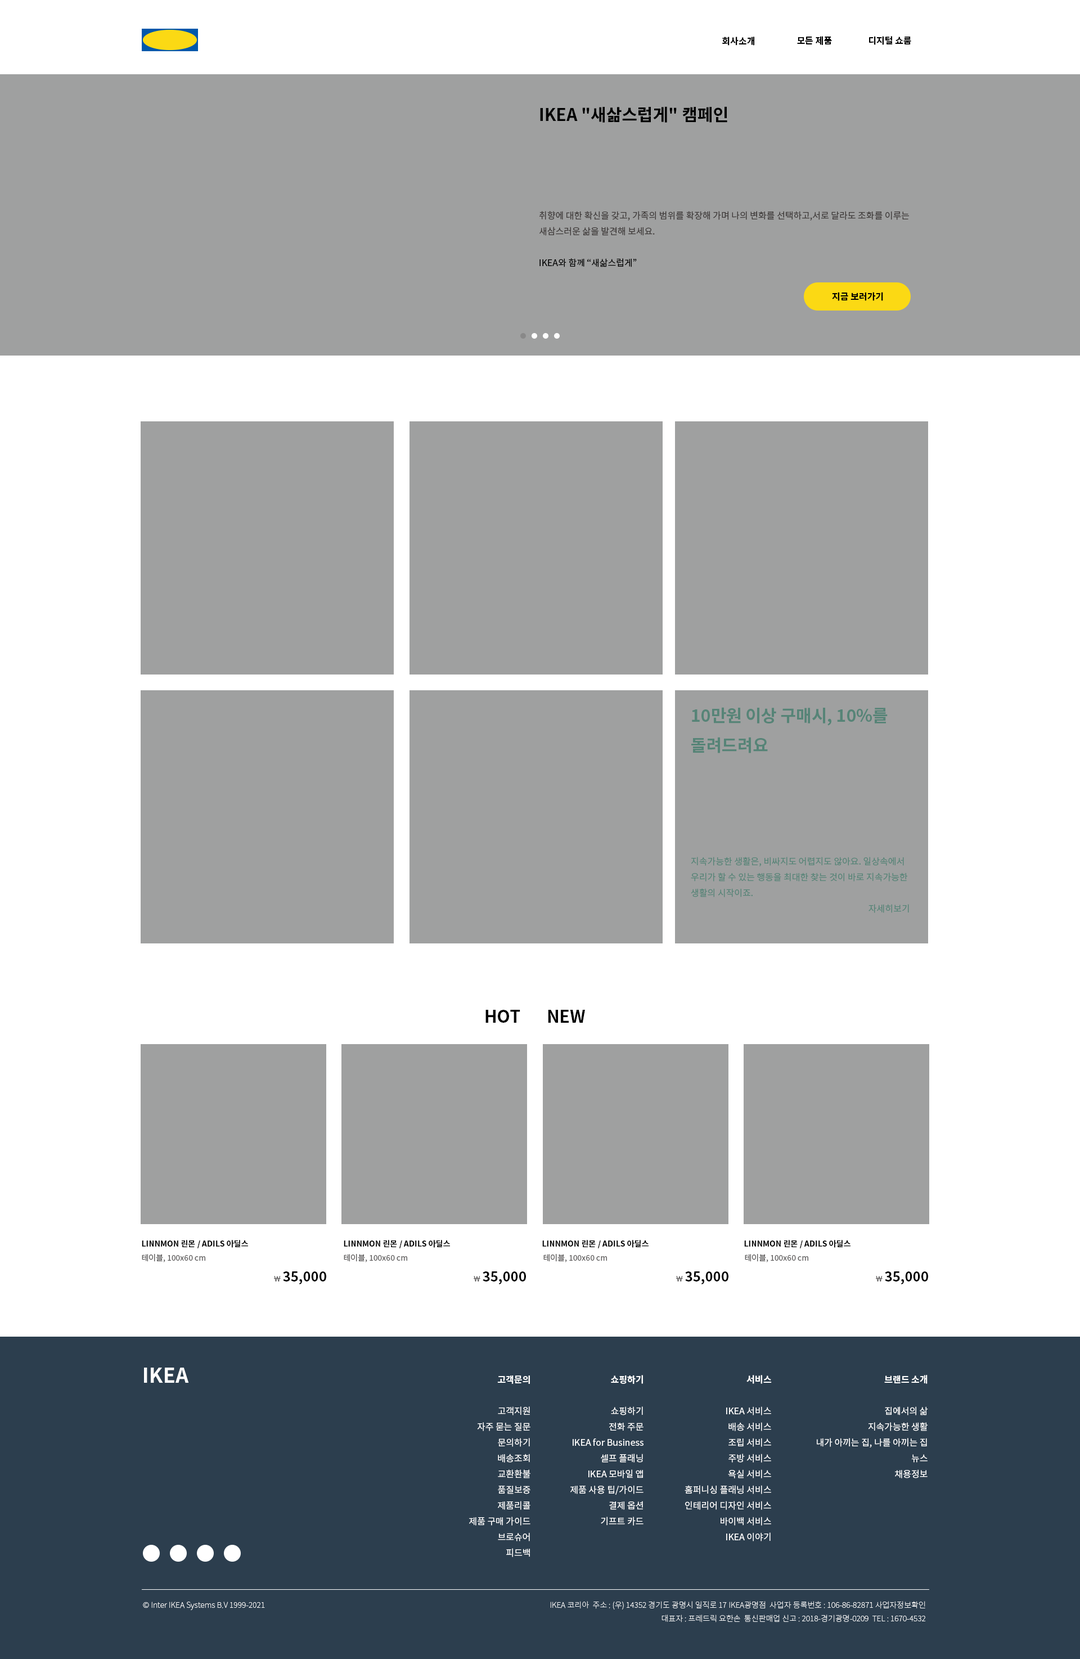
<style>
.page{position:relative;width:1080px;height:1659px;background:#9fa0a0}
.page>*{position:absolute;margin:0}
.t1{font:9px "NotoSansKR-Bold";color:#000000}
.t2{font:9px "NotoSansKR-Regular";color:#3e3a39}
.t3{font:16.9px "NotoSansKR-Bold";color:#000000}
.t4{font:9px "NotoSansKR-Regular";color:#000000}
.t5{font:9px "NotoSansKR-Regular";color:#568477}
.t6{font:16.9px "NotoSansKR-Bold";color:#568477}
.t7{font:7.9px "NotoSansKR-Bold";color:#000000}
.t8{font:7.9px "NotoSansKR-Regular";color:#595757}
.t9{font:13.5px "NotoSansKR-Bold";color:#000000}
.t10{font:20.2px "NotoSansKR-Bold";color:#ffffff}
.t11{font:9px "NotoSansKR-Regular";color:#ffffff}
.t12{font:9px "NotoSansKR-Bold";color:#ffffff}
.t13{font:7.9px "NotoSansKR-Thin";color:#ffffff}
</style>
<div class="page">
<p class="t1" style="left:722px;top:37px;width:32px;height:9px">회사소개</p>
<p class="t1" style="left:797px;top:36px;width:35px;height:9px">모든 제품</p>
<p class="t1" style="left:869px;top:36px;width:42px;height:9px">디지털 쇼룸</p>
<p class="t2" style="left:539px;top:106px;width:370px;height:161px"><span class="t3">IKEA "새삶스럽게" 캠페인<br><br><br><br></span>취향에 대한 확신을 갖고, 가족의 범위를 확장해 가며 나의 변화를 선택하고,서로 달라도 조화를 이루는 새삼스러운 삶을 발견해 보세요.<br><span class="t4"><br>IKEA와 함께 “새삶스럽게”</span></p>
<p class="t1" style="left:832px;top:292px;width:51px;height:9px">지금 보러가기</p>
<p class="t5" style="left:691px;top:707px;width:218px;height:206px"><span class="t6">10만원 이상 구매시, 10%를 돌려드려요<br><br><br></span><br><br>지속가능한 생활은, 비싸지도 어렵지도 않아요. 일상속에서 우리가 할 수 있는 행동을 최대한 찾는 것이 바로 지속가능한 생활의 시작이죠.<br>자세히보기</p>
<p class="t3" style="left:485px;top:1010px;width:35px;height:13px">HOT</p>
<p class="t3" style="left:548px;top:1010px;width:37px;height:13px">NEW</p>
<p class="t7" style="left:142px;top:1240px;width:106px;height:8px">LINNMON 린몬 / ADILS 아딜스</p>
<p class="t7" style="left:344px;top:1240px;width:106px;height:8px">LINNMON 린몬 / ADILS 아딜스</p>
<p class="t7" style="left:542px;top:1240px;width:107px;height:8px">LINNMON 린몬 / ADILS 아딜스</p>
<p class="t7" style="left:744px;top:1240px;width:106px;height:8px">LINNMON 린몬 / ADILS 아딜스</p>
<p class="t8" style="left:142px;top:1254px;width:63px;height:8px">테이블, 100x60 cm</p>
<p class="t8" style="left:344px;top:1254px;width:63px;height:8px">테이블, 100x60 cm</p>
<p class="t8" style="left:543px;top:1254px;width:64px;height:8px">테이블, 100x60 cm</p>
<p class="t8" style="left:745px;top:1254px;width:63px;height:8px">테이블, 100x60 cm</p>
<p class="t8" style="left:274px;top:1276px;width:7px;height:5px">￦</p>
<p class="t9" style="left:283px;top:1271px;width:43px;height:14px">35,000</p>
<p class="t8" style="left:474px;top:1276px;width:6px;height:5px">￦</p>
<p class="t9" style="left:483px;top:1271px;width:43px;height:14px">35,000</p>
<p class="t8" style="left:676px;top:1276px;width:7px;height:5px">￦</p>
<p class="t9" style="left:685px;top:1271px;width:43px;height:14px">35,000</p>
<p class="t8" style="left:876px;top:1276px;width:7px;height:5px">￦</p>
<p class="t9" style="left:885px;top:1271px;width:43px;height:14px">35,000</p>
<p class="t10" style="left:144px;top:1367px;width:45px;height:16px">IKEA</p>
<p class="t11" style="left:469px;top:1375px;width:61px;height:182px;text-align:right"><span class="t12">고객문의<br></span><br>고객지원<br>자주 묻는 질문<br>문의하기<br>배송조회<br>교환환불<br>품질보증<br>제품리콜<br>제품 구매 가이드<br>브로슈어<br>피드백</p>
<p class="t11" style="left:570px;top:1375px;width:74px;height:151px;text-align:right"><span class="t12">쇼핑하기<br></span><br>쇼핑하기<br>전화 주문<br>IKEA for Business<br>셀프 플래닝<br>IKEA 모바일 앱<br>제품 사용 팁/가이드<br>결제 옵션<br>기프트 카드</p>
<p class="t11" style="left:685px;top:1375px;width:87px;height:166px;text-align:right"><span class="t12">서비스<br></span><br>IKEA 서비스<br>배송 서비스<br>조립 서비스<br>주방 서비스<br>욕실 서비스<br>홈퍼니싱 플래닝 서비스<br>인테리어 디자인 서비스<br>바이백 서비스<br>IKEA 이야기</p>
<p class="t11" style="left:817px;top:1375px;width:111px;height:103px;text-align:right"><span class="t12">브랜드 소개<br></span><br>집에서의 삶<br>지속가능한 생활<br>내가 아끼는 집, 나를 아끼는 집<br>뉴스<br>채용정보</p>
<p class="t13" style="left:143px;top:1601px;width:122px;height:9px">© Inter IKEA Systems B.V 1999-2021</p>
<p class="t13" style="left:550px;top:1601px;width:376px;height:21px;text-align:right">IKEA 코리아  주소 : (우) 14352 경기도 광명시 일직로 17 IKEA광명점  사업자 등록번호 : 106-86-82871 사업자정보확인<br>대표자 : 프레드릭 요한손  통신판매업 신고 : 2018-경기광명-0209  TEL : 1670-4532</p>
</div>
